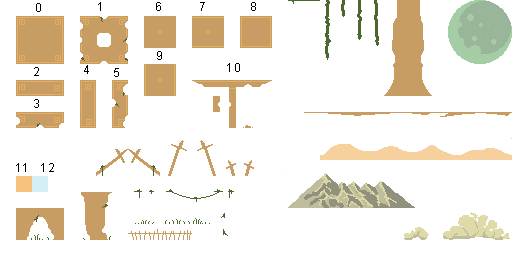
<style>
.page{position:relative;width:512px;height:256px;background:#ffffff}
.page>*{position:absolute;margin:0}
.t1{font:12px "ArialMT";letter-spacing:0.05em;color:#000000}
</style>
<div class="page">
<p class="t1" style="left:36px;top:3px;width:5px;height:9px">0</p>
<p class="t1" style="left:98px;top:2px;width:3px;height:9px">1</p>
<p class="t1" style="left:156px;top:2px;width:5px;height:9px">6</p>
<p class="t1" style="left:200px;top:2px;width:5px;height:9px">7</p>
<p class="t1" style="left:251px;top:2px;width:5px;height:9px">8</p>
<p class="t1" style="left:157px;top:51px;width:5px;height:9px">9</p>
<p class="t1" style="left:84px;top:65px;width:5px;height:9px">4</p>
<p class="t1" style="left:227px;top:63px;width:13px;height:9px">10</p>
<p class="t1" style="left:34px;top:67px;width:5px;height:9px">2</p>
<p class="t1" style="left:114px;top:68px;width:5px;height:9px">5</p>
<p class="t1" style="left:34px;top:99px;width:5px;height:9px">3</p>
<p class="t1" style="left:16px;top:163px;width:10px;height:9px">11</p>
<p class="t1" style="left:41px;top:163px;width:13px;height:9px">12</p>
</div>
